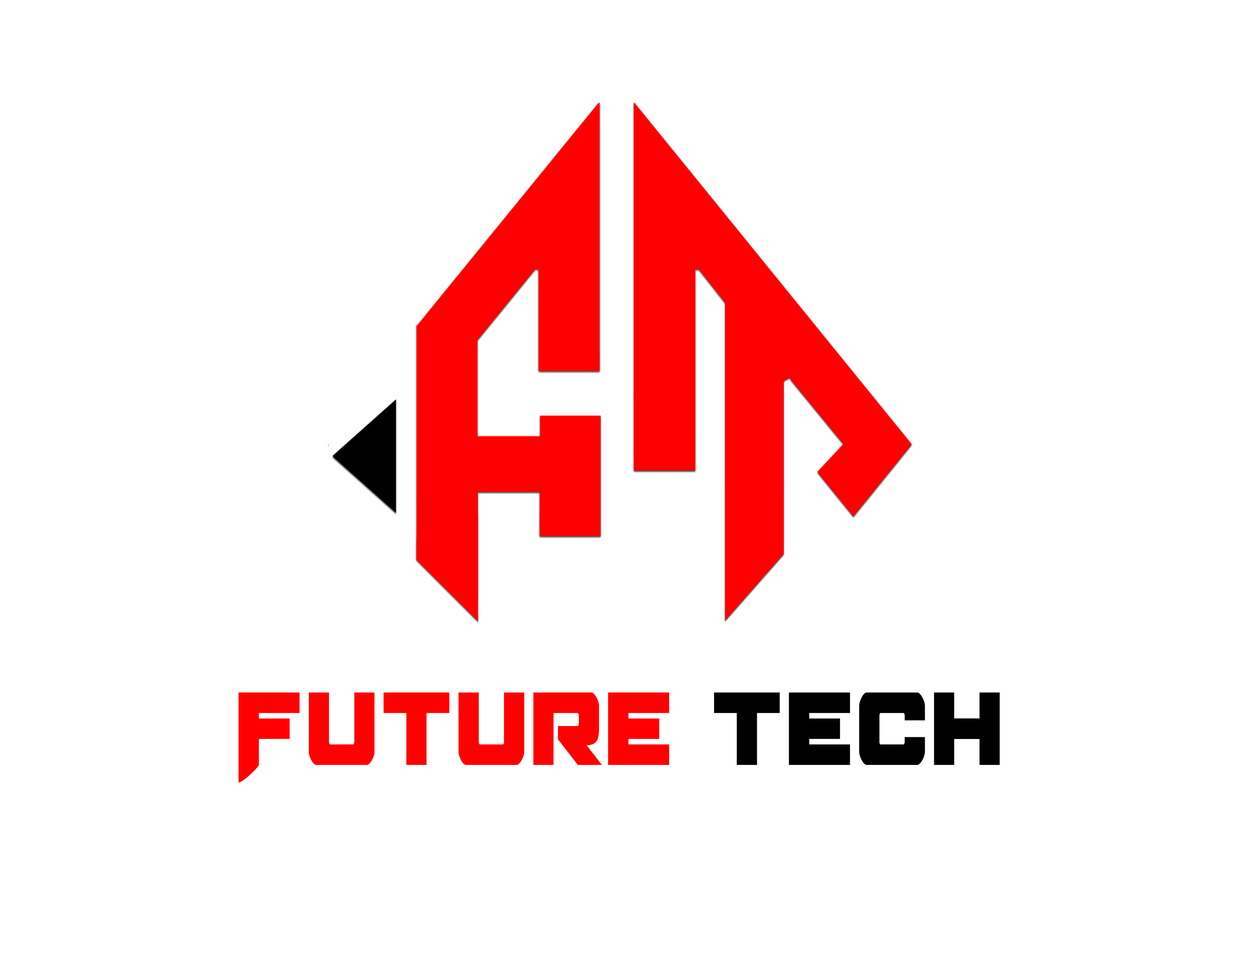
<style>
.page{position:relative;width:1242px;height:960px;background:#ffffff}
.page>*{position:absolute;margin:0}
.t1{font:131.6px "BomberEscortCondensed";letter-spacing:0.03em;color:#ff0000;scale:0.91 1}
.t2{font:131.6px "BomberEscortCondensed";letter-spacing:0.03em;color:#000000;scale:0.91 1}
</style>
<div class="page">
<p class="t1" style="left:238px;top:693px;width:761px;height:90px">Future<span class="t2"> tech</span></p>
</div>
